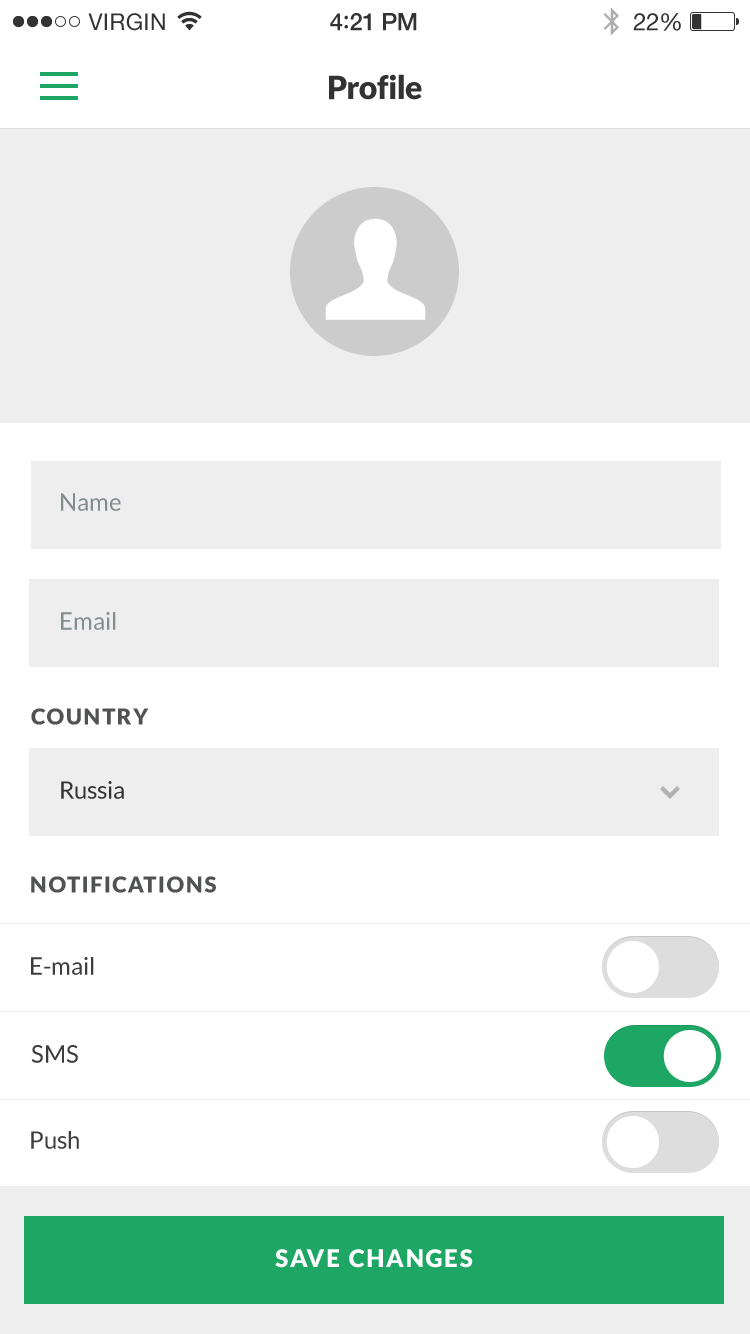
<style>
.page{position:relative;width:750px;height:1334px;background:#ffffff}
.page>*{position:absolute;margin:0}
.t1{font:32px "Lato-Black";letter-spacing:-0.02em;color:#333333}
.t2{font:24px "Lato-Regular";color:#838c8e}
.t3{font:22px "Lato-Black";letter-spacing:0.07em;color:#515252}
.t4{font:24px "Lato-Regular";color:#333333}
.t5{font:24px "Lato-Regular";color:#3b3d40}
.t6{font:24px "Lato-Black";letter-spacing:0.07em;color:#ffffff}
</style>
<div class="page">
<p class="t1" style="left:329px;top:74px;width:93px;height:26px">Profile</p>
<p class="t2" style="left:61px;top:493px;width:60px;height:18px">Name</p>
<p class="t2" style="left:61px;top:612px;width:55px;height:18px">Email</p>
<p class="t3" style="left:31px;top:708px;width:118px;height:17px">COUNTRY</p>
<p class="t4" style="left:61px;top:781px;width:63px;height:18px">Russia</p>
<p class="t3" style="left:31px;top:876px;width:185px;height:17px">NOTIFICATIONS</p>
<p class="t5" style="left:31px;top:957px;width:63px;height:18px">E-mail</p>
<p class="t5" style="left:31px;top:1045px;width:47px;height:18px">SMS</p>
<p class="t5" style="left:31px;top:1131px;width:48px;height:18px">Push</p>
<p class="t6" style="left:275px;top:1249px;width:198px;height:19px">SAVE CHANGES</p>
</div>
